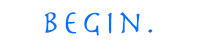
<style>
.page{position:relative;width:200px;height:49px;background:#ffffff}
.page>*{position:absolute;margin:0}
.t1{font:34.3px "Herculanum";letter-spacing:0.065em;color:#0072ff}
</style>
<div class="page">
<p class="t1" style="left:44px;top:12px;width:109px;height:24px">begin.</p>
</div>
